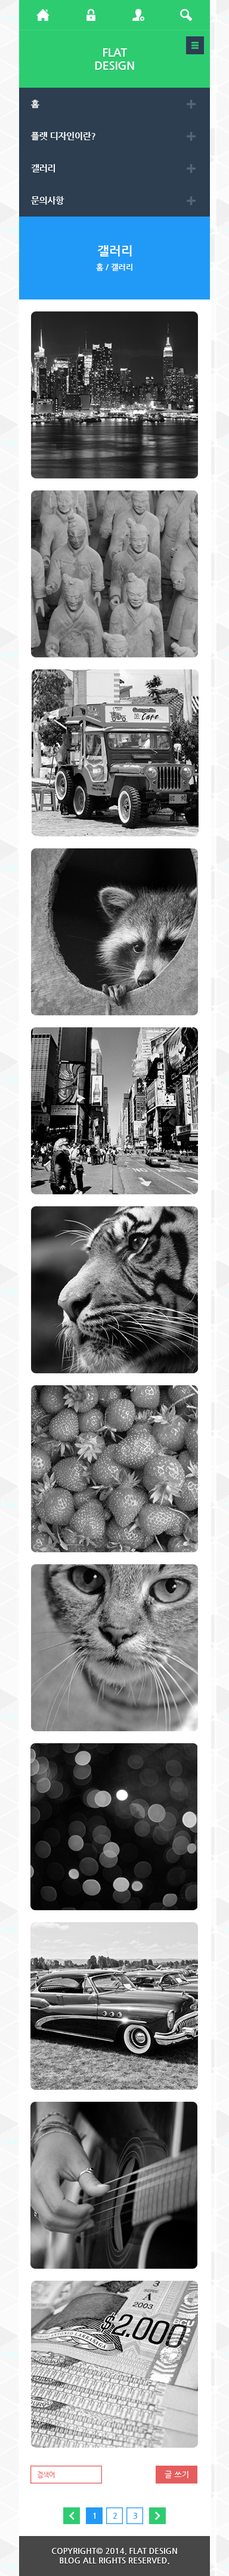
<style>
.page{position:relative;width:229px;height:2576px}
.page>*{position:absolute;margin:0}
.t1{font:11.1px "NanumGothicBold";color:#ffffff}
.t2{font:8.7px "NanumGothicBold";color:#ffffff}
.t3{font:12.7px "NanumGothicBold";color:#ffffff}
.t4{font:8px "NanumGothicBold";color:#ffffff}
.t5{font:6.4px "NanumGothic";color:#e65d5d}
.t6{font:8px "NanumGothic";color:#ffffff}
.t7{font:8px "NanumGothicBold";color:#219af7}
</style>
<div class="page">
<p class="t1" style="left:95px;top:48px;width:39px;height:22px;text-align:center">FLAT<br>DESIGN</p>
<p class="t2" style="left:31px;top:100px;width:8px;height:9px">홈</p>
<p class="t2" style="left:31px;top:132px;width:64px;height:9px">플랫 디자인이란?</p>
<p class="t2" style="left:31px;top:164px;width:24px;height:8px">갤러리</p>
<p class="t2" style="left:31px;top:196px;width:33px;height:9px">문의사항</p>
<p class="t3" style="left:98px;top:245px;width:34px;height:12px">갤러리</p>
<p class="t4" style="left:96px;top:263px;width:36px;height:8px">홈 / 갤러리</p>
<p class="t5" style="left:38px;top:2472px;width:16px;height:6px">검색어</p>
<p class="t6" style="left:165px;top:2470px;width:24px;height:9px">글 쓰기</p>
<p class="t4" style="left:93px;top:2513px;width:2px;height:6px">1</p>
<p class="t7" style="left:113px;top:2513px;width:4px;height:6px">2</p>
<p class="t7" style="left:133px;top:2513px;width:4px;height:6px">3</p>
<p class="t4" style="left:52px;top:2548px;width:125px;height:16px;text-align:center">COPYRIGHT© 2014. FLAT DESIGN<br>BLOG ALL RIGHTS RESERVED.</p>
</div>
